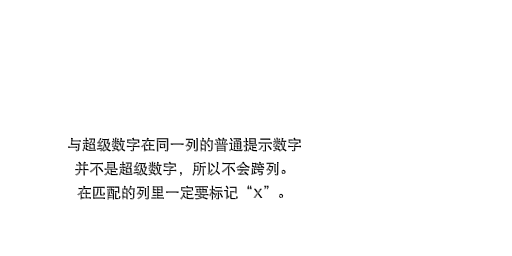
<style>
.page{position:relative;width:512px;height:256px;background:#ffffff}
.page>*{position:absolute;margin:0}
.t1{font:14.7px/24px "DFPHeiW5-GB"}
</style>
<div class="page">
<p class="t1" style="left:68px;top:137px;width:233px;height:63px;text-align:center">与超级数字在同一列的普通提示数字<br>并不是超级数字，所以不会跨列。<br>在匹配的列里一定要标记“X”。</p>
</div>
